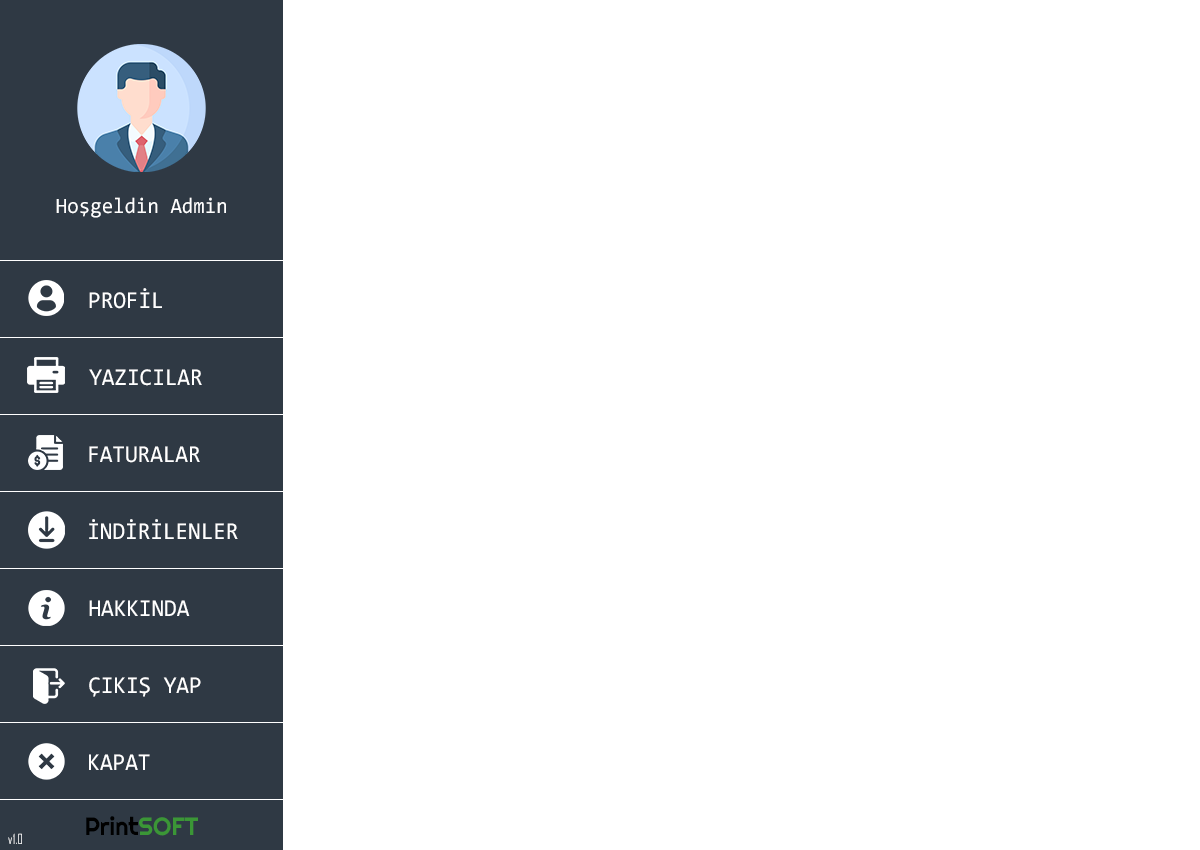
<style>
.page{position:relative;width:1200px;height:850px;background:#ffffff}
.page>*{position:absolute;margin:0}
.t1{font:22.1px "Consolas";color:#ffffff;scale:0.94 1}
.t2{font:24.3px "Consolas";color:#ffffff;scale:0.94 1}
.t3{font:25px "Righteous-Regular";color:#000000;scale:0.94 1}
.t4{font:25px "Righteous-Regular";color:#3b9636;scale:0.94 1}
.t5{font:13.5px "AgencyFB-Reg";color:#ffffff;scale:0.94 1}
</style>
<div class="page">
<p class="t1" style="left:56px;top:197px;width:170px;height:21px">Hoşgeldin Admin</p>
<p class="t2" style="left:89px;top:288px;width:73px;height:21px">PROFİL</p>
<p class="t2" style="left:89px;top:369px;width:113px;height:17px">YAZICILAR</p>
<p class="t2" style="left:89px;top:446px;width:111px;height:17px">FATURALAR</p>
<p class="t2" style="left:89px;top:519px;width:149px;height:20px">İNDİRİLENLER</p>
<p class="t2" style="left:89px;top:600px;width:101px;height:16px">HAKKINDA</p>
<p class="t2" style="left:89px;top:677px;width:112px;height:20px">ÇIKIŞ YAP</p>
<p class="t2" style="left:89px;top:754px;width:61px;height:16px">KAPAT</p>
<p class="t3" style="left:86px;top:816px;width:112px;height:20px">Print<span class="t4">SOFT</span></p>
<p class="t5" style="left:8px;top:833px;width:14px;height:11px">v1.0</p>
</div>
